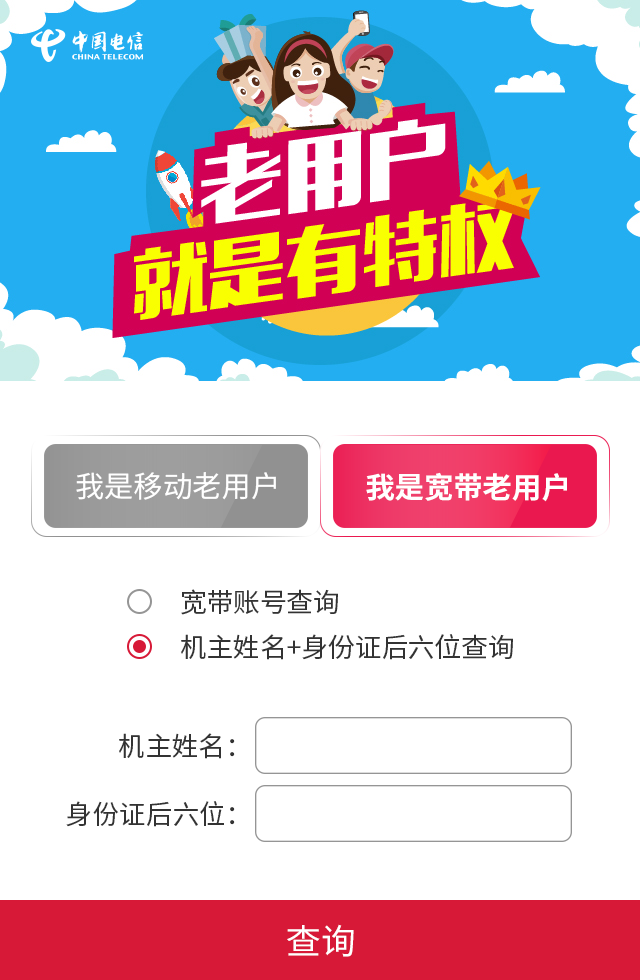
<style>
.page{position:relative;width:640px;height:980px;background:#ffffff}
.page>*{position:absolute;margin:0}
.t1{font:29.3px "SourceHanSansCN-Regular";color:#ffffff}
.t2{font:29.3px "SourceHanSansCN-Bold";color:#ffffff}
.t3{font:26.7px "SourceHanSansCN-Regular";color:#333333}
.t4{font:34.7px "SourceHanSansCN-Regular";color:#ffffff}
</style>
<div class="page">
<p class="t1" style="left:76px;top:472px;width:200px;height:28px">我是移动老用户</p>
<p class="t2" style="left:366px;top:472px;width:201px;height:30px">我是宽带老用户</p>
<p class="t3" style="left:181px;top:589px;width:157px;height:26px">宽带账号查询</p>
<p class="t3" style="left:181px;top:634px;width:332px;height:26px">机主姓名+身份证后六位查询</p>
<p class="t3" style="left:119px;top:733px;width:116px;height:26px">机主姓名：</p>
<p class="t3" style="left:66px;top:801px;width:169px;height:26px">身份证后六位：</p>
<p class="t4" style="left:287px;top:924px;width:67px;height:33px">查询</p>
</div>
